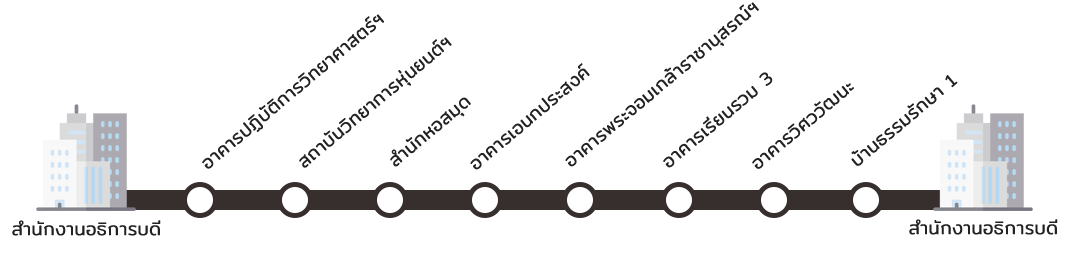
<style>
.page{position:relative;width:1080px;height:264px;background:#ffffff}
.page>*{position:absolute;margin:0}
.t1{font:18px "Mitr-Light";color:#222222;font-weight:bold}
</style>
<div class="page">
<p class="t1" style="left:565px;top:2px;width:194px;height:165px;rotate:-40deg">อาคารพระจอมเกล้าราชานุสรณ์ฯ</p>
<p class="t1" style="left:202px;top:14px;width:182px;height:155px;rotate:-40deg">อาคารปฏิบัติการวิทยาศาสตร์ฯ</p>
<p class="t1" style="left:299px;top:37px;width:153px;height:131px;rotate:-40deg">สถาบันวิทยาการหุ่นยนต์ฯ</p>
<p class="t1" style="left:470px;top:63px;width:120px;height:107px;rotate:-40deg">อาคารเอนกประสงค์</p>
<p class="t1" style="left:663px;top:72px;width:110px;height:96px;rotate:-40deg">อาคารเรียนรวม 3</p>
<p class="t1" style="left:851px;top:75px;width:107px;height:91px;rotate:-40deg">บ้านธรรมรักษา 1</p>
<p class="t1" style="left:752px;top:83px;width:102px;height:86px;rotate:-40deg">อาคารวิศววัฒนะ</p>
<p class="t1" style="left:390px;top:97px;width:81px;height:70px;rotate:-40deg">สำนักหอสมุด</p>
<p class="t1" style="left:12px;top:220px;width:149px;height:16px">สำนักงานอธิการบดี</p>
<p class="t1" style="left:909px;top:219px;width:149px;height:16px">สำนักงานอธิการบดี</p>
</div>
